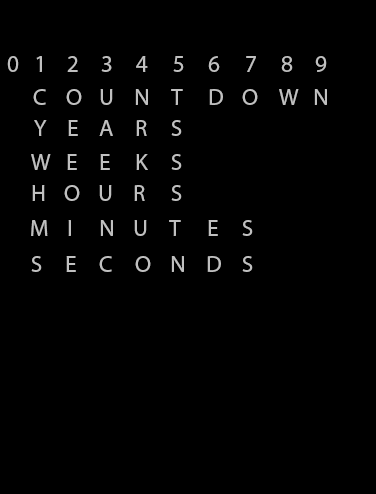
<style>
.page{position:relative;width:376px;height:494px;background:#000000}
.page>*{position:absolute;margin:0}
.t1{font:23.9px "MyriadPro-Regular";color:#c0c0c0}
</style>
<div class="page">
<p class="t1" style="left:7px;top:56px;width:12px;height:16px">0</p>
<p class="t1" style="left:36px;top:56px;width:6px;height:16px">1</p>
<p class="t1" style="left:67px;top:56px;width:11px;height:16px">2</p>
<p class="t1" style="left:101px;top:56px;width:11px;height:16px">3</p>
<p class="t1" style="left:136px;top:56px;width:12px;height:16px">4</p>
<p class="t1" style="left:173px;top:56px;width:11px;height:16px">5</p>
<p class="t1" style="left:208px;top:56px;width:12px;height:16px">6</p>
<p class="t1" style="left:246px;top:56px;width:10px;height:16px">7</p>
<p class="t1" style="left:281px;top:56px;width:12px;height:16px">8</p>
<p class="t1" style="left:315px;top:56px;width:12px;height:16px">9</p>
<p class="t1" style="left:33px;top:89px;width:13px;height:16px">C</p>
<p class="t1" style="left:66px;top:89px;width:16px;height:16px">O</p>
<p class="t1" style="left:100px;top:89px;width:13px;height:16px">U</p>
<p class="t1" style="left:135px;top:89px;width:13px;height:16px">N</p>
<p class="t1" style="left:171px;top:89px;width:12px;height:16px">T</p>
<p class="t1" style="left:209px;top:89px;width:14px;height:16px">D</p>
<p class="t1" style="left:242px;top:89px;width:16px;height:16px">O</p>
<p class="t1" style="left:279px;top:89px;width:20px;height:16px">W</p>
<p class="t1" style="left:314px;top:89px;width:13px;height:16px">N</p>
<p class="t1" style="left:34px;top:120px;width:13px;height:16px">Y</p>
<p class="t1" style="left:68px;top:120px;width:10px;height:16px">E</p>
<p class="t1" style="left:99px;top:120px;width:14px;height:16px">A</p>
<p class="t1" style="left:136px;top:120px;width:11px;height:16px">R</p>
<p class="t1" style="left:171px;top:120px;width:11px;height:16px">S</p>
<p class="t1" style="left:31px;top:154px;width:20px;height:16px">W</p>
<p class="t1" style="left:67px;top:154px;width:10px;height:16px">E</p>
<p class="t1" style="left:100px;top:154px;width:10px;height:16px">E</p>
<p class="t1" style="left:136px;top:154px;width:12px;height:16px">K</p>
<p class="t1" style="left:171px;top:154px;width:11px;height:16px">S</p>
<p class="t1" style="left:32px;top:185px;width:13px;height:16px">H</p>
<p class="t1" style="left:64px;top:185px;width:16px;height:16px">O</p>
<p class="t1" style="left:99px;top:185px;width:13px;height:16px">U</p>
<p class="t1" style="left:134px;top:185px;width:11px;height:16px">R</p>
<p class="t1" style="left:171px;top:185px;width:11px;height:16px">S</p>
<p class="t1" style="left:31px;top:220px;width:17px;height:16px">M</p>
<p class="t1" style="left:68px;top:220px;width:3px;height:16px">I</p>
<p class="t1" style="left:100px;top:220px;width:13px;height:16px">N</p>
<p class="t1" style="left:134px;top:220px;width:13px;height:16px">U</p>
<p class="t1" style="left:169px;top:220px;width:12px;height:16px">T</p>
<p class="t1" style="left:208px;top:220px;width:10px;height:16px">E</p>
<p class="t1" style="left:242px;top:220px;width:11px;height:16px">S</p>
<p class="t1" style="left:31px;top:256px;width:11px;height:16px">S</p>
<p class="t1" style="left:66px;top:256px;width:10px;height:16px">E</p>
<p class="t1" style="left:99px;top:256px;width:13px;height:16px">C</p>
<p class="t1" style="left:135px;top:256px;width:16px;height:16px">O</p>
<p class="t1" style="left:171px;top:256px;width:13px;height:16px">N</p>
<p class="t1" style="left:207px;top:256px;width:14px;height:16px">D</p>
<p class="t1" style="left:242px;top:256px;width:11px;height:16px">S</p>
</div>
